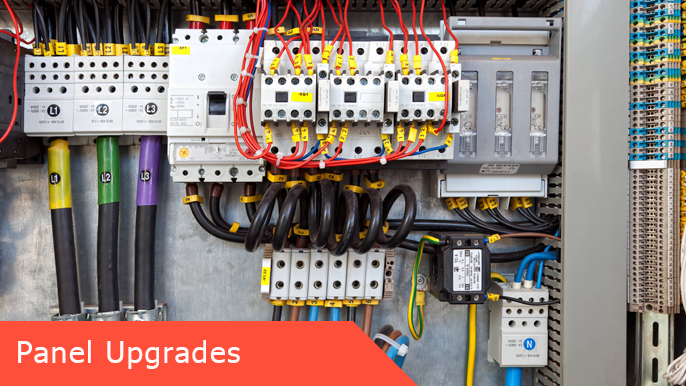
<style>
.page{position:relative;width:686px;height:386px}
.page>*{position:absolute;margin:0}
.t1{font:30px "Tahoma";letter-spacing:0.05em;color:#fffafa}
</style>
<div class="page">
<p class="t1" style="left:18px;top:340px;width:222px;height:29px">Panel Upgrades</p>
</div>
